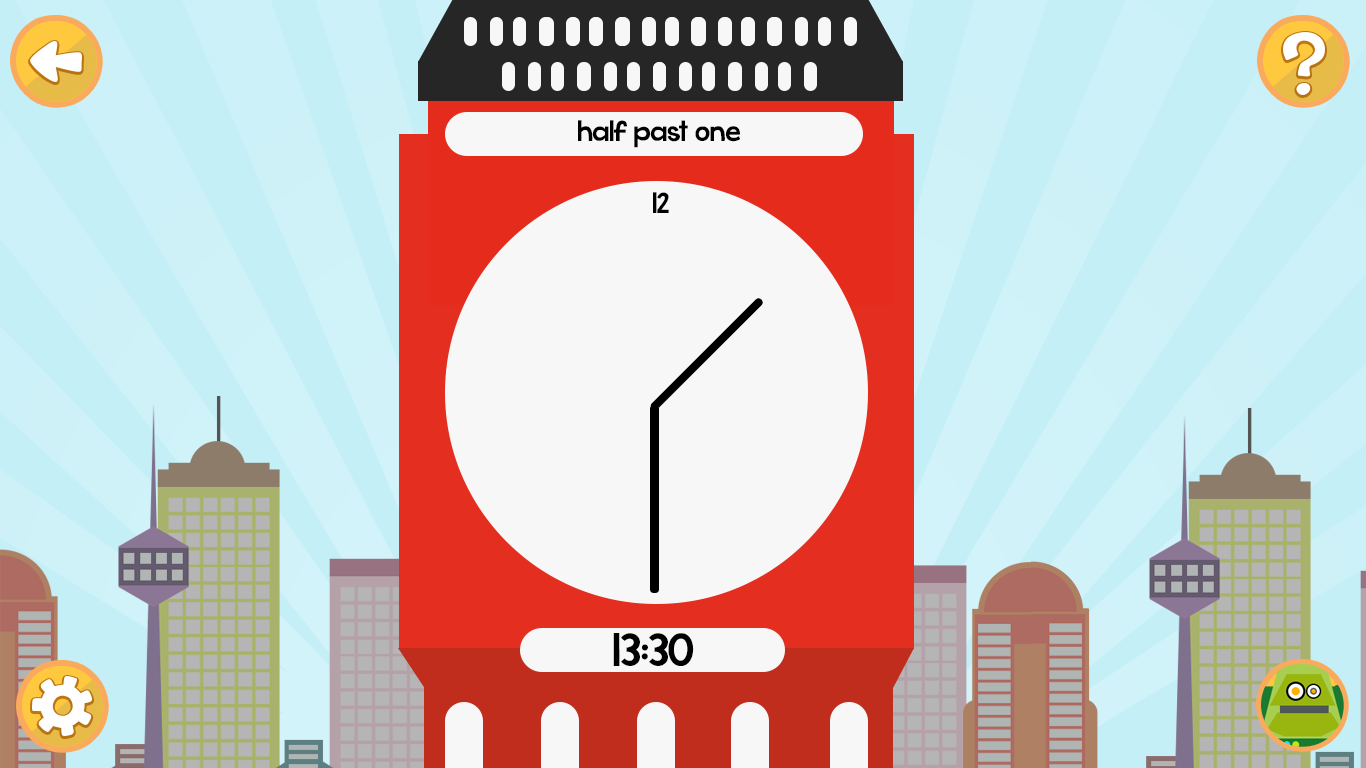
<style>
.page{position:relative;width:1366px;height:768px;background:#c5eff7}
.page>*{position:absolute;margin:0}
.t1{font:30px "KGWhattheTeacherWants";color:#000000}
.t2{font:48px "KGWhattheTeacherWants";color:#000000}
</style>
<div class="page">
<p class="t1" style="left:578px;top:120px;width:163px;height:28px">half past one</p>
<p class="t1" style="left:653px;top:192px;width:16px;height:21px">12</p>
<p class="t2" style="left:613px;top:633px;width:81px;height:33px">13:30</p>
</div>
